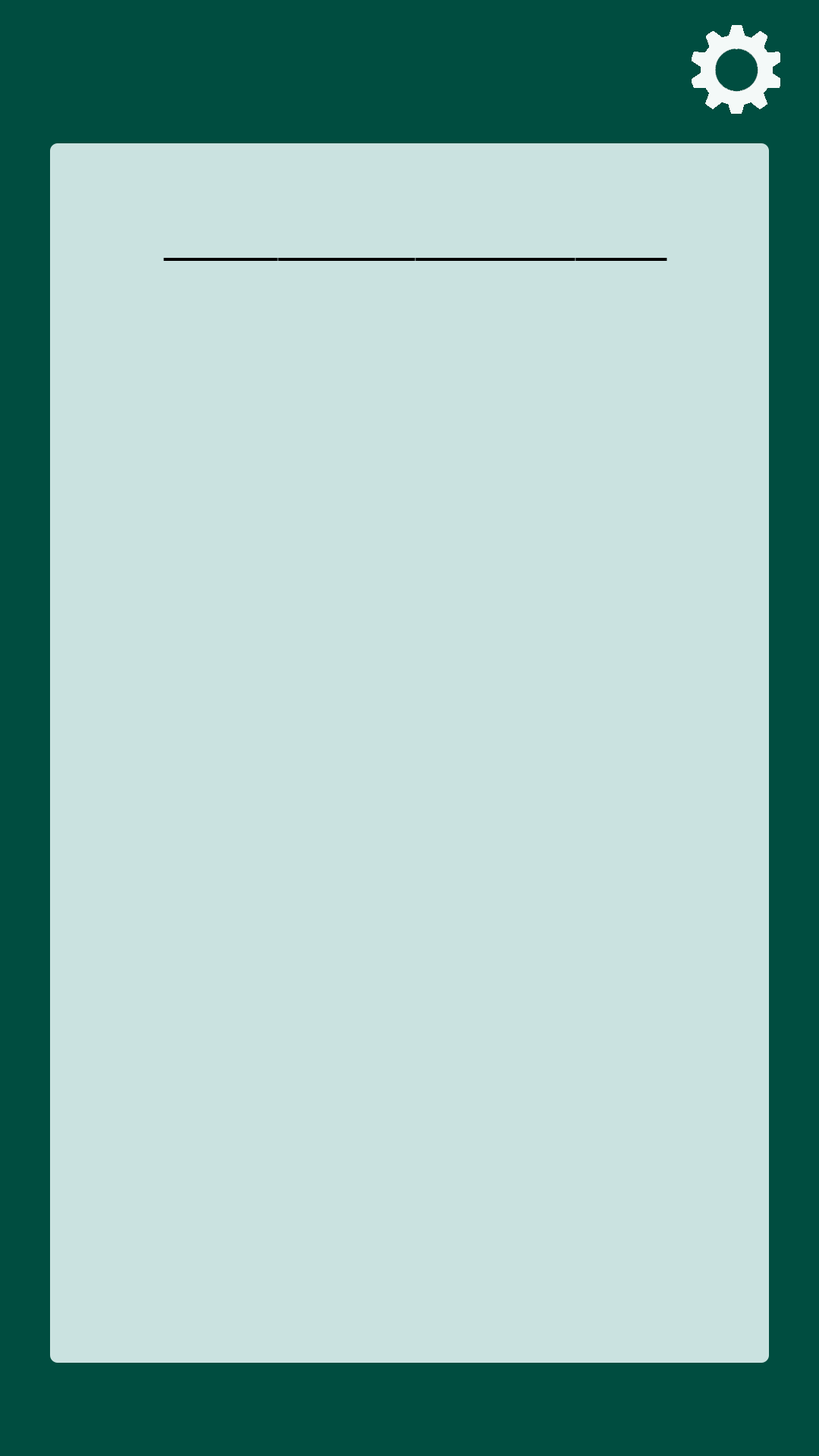
<style>
.page{position:relative;width:819px;height:1456px;background:#cae2e0}
.page>*{position:absolute;margin:0}
.t1{font:43.6px "TrebuchetMS";color:#000000}
</style>
<div class="page">
<p class="t1" style="left:163px;top:258px;width:504px;height:3px">______________________</p>
</div>
